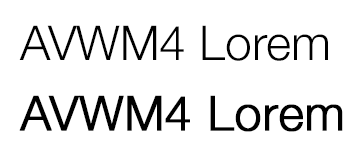
<style>
.page{position:relative;width:360px;height:160px;background:#ffffff}
.page>*{position:absolute;margin:0}
.t1{font:48px "HelveticaNeue-Light";color:#000000}
.t2{font:48px "HelveticaNeue-Light";color:#000000;font-weight:bold}
</style>
<div class="page">
<p class="t1" style="left:19px;top:25px;width:309px;height:36px">AVWM4 Lorem</p>
<p class="t2" style="left:19px;top:95px;width:324px;height:37px">AVWM4 Lorem</p>
</div>
